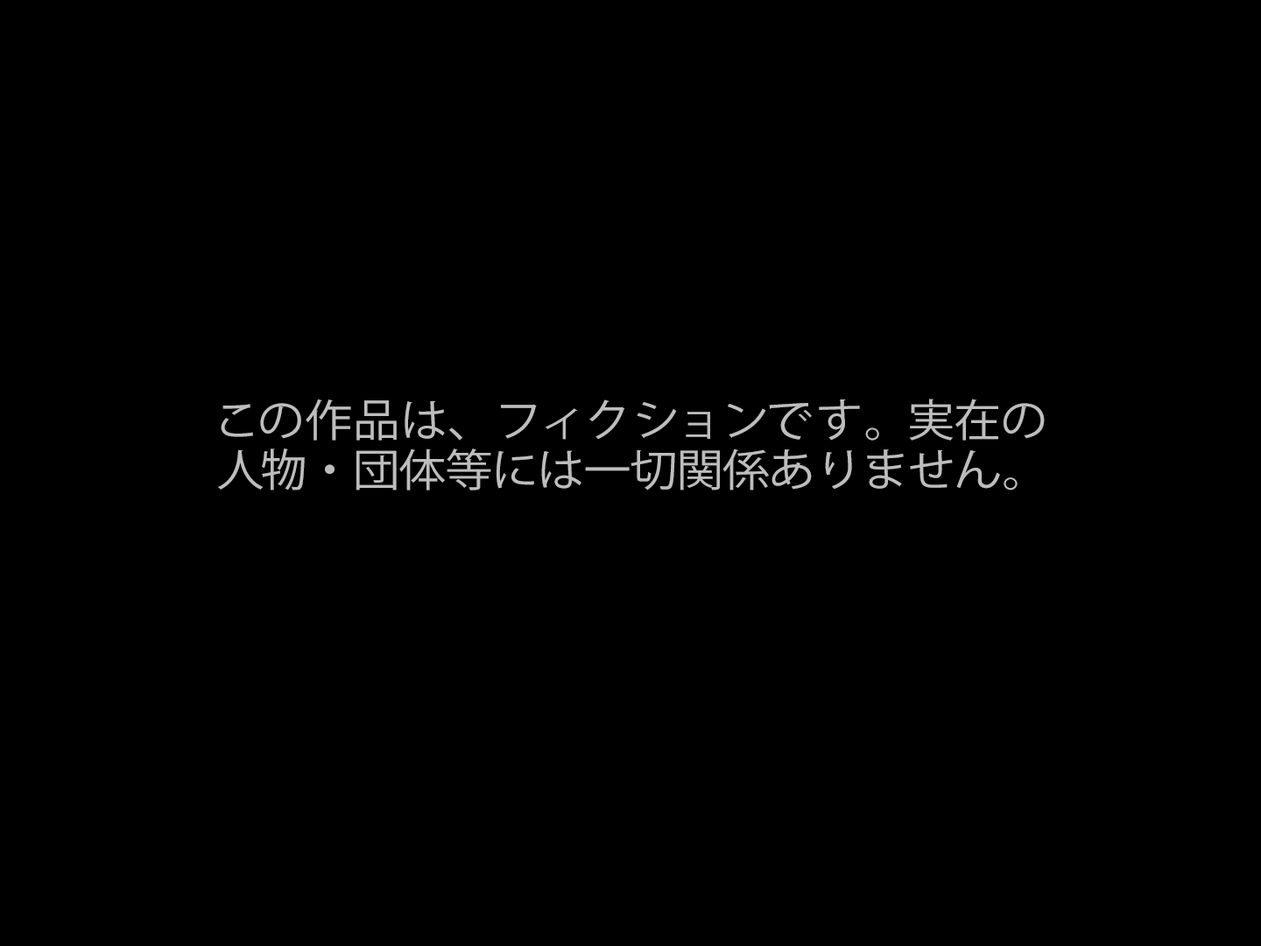
<style>
.page{position:relative;width:1261px;height:946px;background:#000000}
.page>*{position:absolute;margin:0}
.t1{font:44.3px/49.6px "KozGoPr6N-Regular";letter-spacing:-0.016em;color:#bdbdbd;scale:1.06 1}
.t2{font:44.3px "KozGoPr6N-Regular";letter-spacing:0.015em;color:#bdbdbd;scale:1.06 1}
.t3{font:44.3px "KozGoPr6N-Regular";letter-spacing:0.14em;color:#bdbdbd;scale:1.06 1}
.t4{font:44.3px "KozGoPr6N-Regular";letter-spacing:0.06em;color:#bdbdbd;scale:1.06 1}
.t5{font:44.3px "KozGoPr6N-Regular";letter-spacing:-0.02em;color:#bdbdbd;scale:1.06 1}
.t6{font:44.3px "KozGoPr6N-Regular";letter-spacing:-0.016em;color:#bdbdbd;scale:1.06 1}
.t7{font:44.3px/49.6px "KozGoPr6N-Regular";letter-spacing:-0.08em;color:#bdbdbd;scale:1.06 1}
.t8{font:44.3px/49.6px "KozGoPr6N-Regular";letter-spacing:0.22em;color:#bdbdbd;scale:1.06 1}
.t9{font:44.3px/49.6px "KozGoPr6N-Regular";letter-spacing:0.24em;color:#bdbdbd;scale:1.06 1}
.t10{font:44.3px/49.6px "KozGoPr6N-Regular";letter-spacing:0.12em;color:#bdbdbd;scale:1.06 1}
.t11{font:44.3px/49.6px "KozGoPr6N-Regular";letter-spacing:0.14em;color:#bdbdbd;scale:1.06 1}
.t12{font:44.3px/49.6px "KozGoPr6N-Regular";letter-spacing:0.02em;color:#bdbdbd;scale:1.06 1}
</style>
<div class="page">
<p class="t1" style="left:218px;top:398px;width:827px;height:92px"><span class="t2">この作品は、  </span><span class="t3">フィク</span><span class="t4">シ</span><span class="t3">ョ</span><span class="t5">ン</span><span class="t4">で</span><span class="t3">す。 </span><span class="t6">実在の<br></span><span class="t7">人</span><span class="t8">物</span><span class="t9">・</span>団体等には一切関係<span class="t10">あ</span><span class="t11">り</span><span class="t12">ません。</span></p>
</div>
